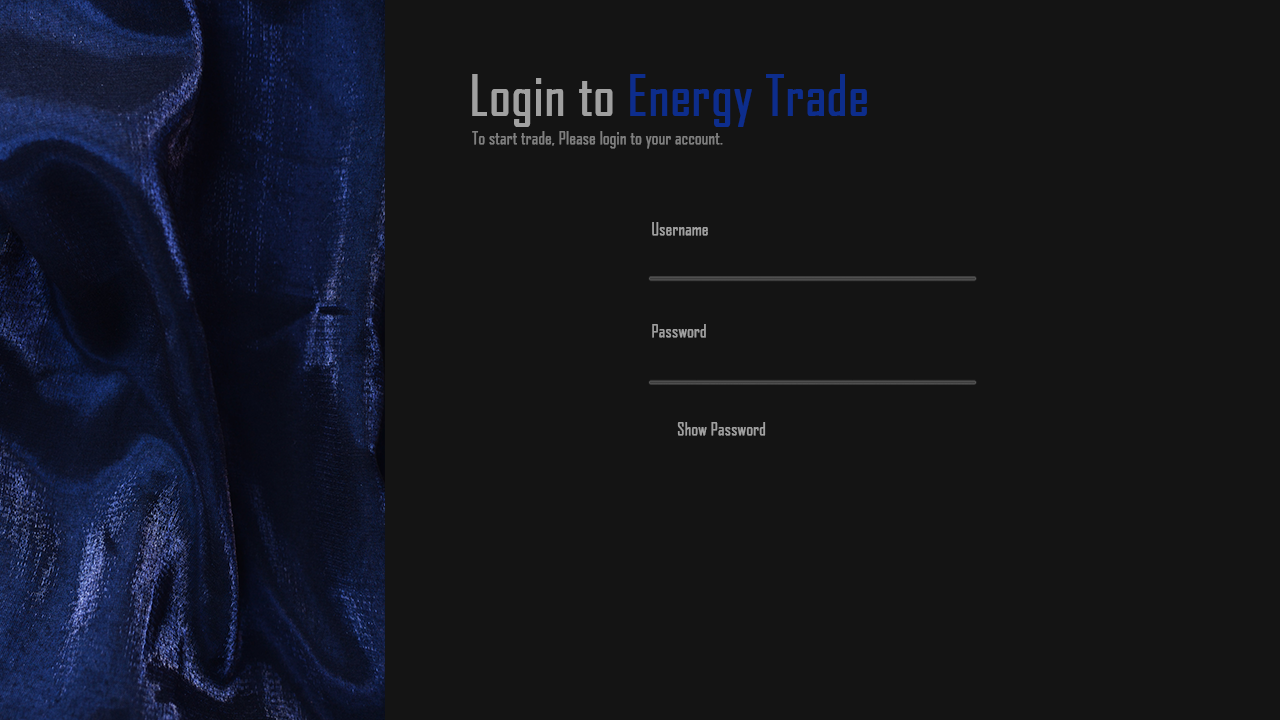
<style>
.page{position:relative;width:1280px;height:720px;background:#141414}
.page>*{position:absolute;margin:0}
.t1{font:54.1px "AgencyFB-Reg";color:#0d2d8c;font-weight:bold}
.t2{font:54.1px "AgencyFB-Reg";color:#a0a0a0;font-weight:bold}
.t3{font:16.6px "AgencyFB-Reg";color:#7f7f7f;font-weight:bold}
.t4{font:16.6px "AgencyFB-Reg";color:#a0a0a0;font-weight:bold}
</style>
<div class="page">
<p class="t1" style="left:472px;top:74px;width:395px;height:53px"><span class="t2">Login to </span>Energy Trade</p>
<p class="t3" style="left:472px;top:131px;width:251px;height:18px">To start trade, Please login to your account.</p>
<p class="t4" style="left:652px;top:222px;width:56px;height:14px">Username</p>
<p class="t4" style="left:652px;top:324px;width:54px;height:14px">Password</p>
<p class="t4" style="left:677px;top:422px;width:89px;height:14px">Show Password</p>
</div>
